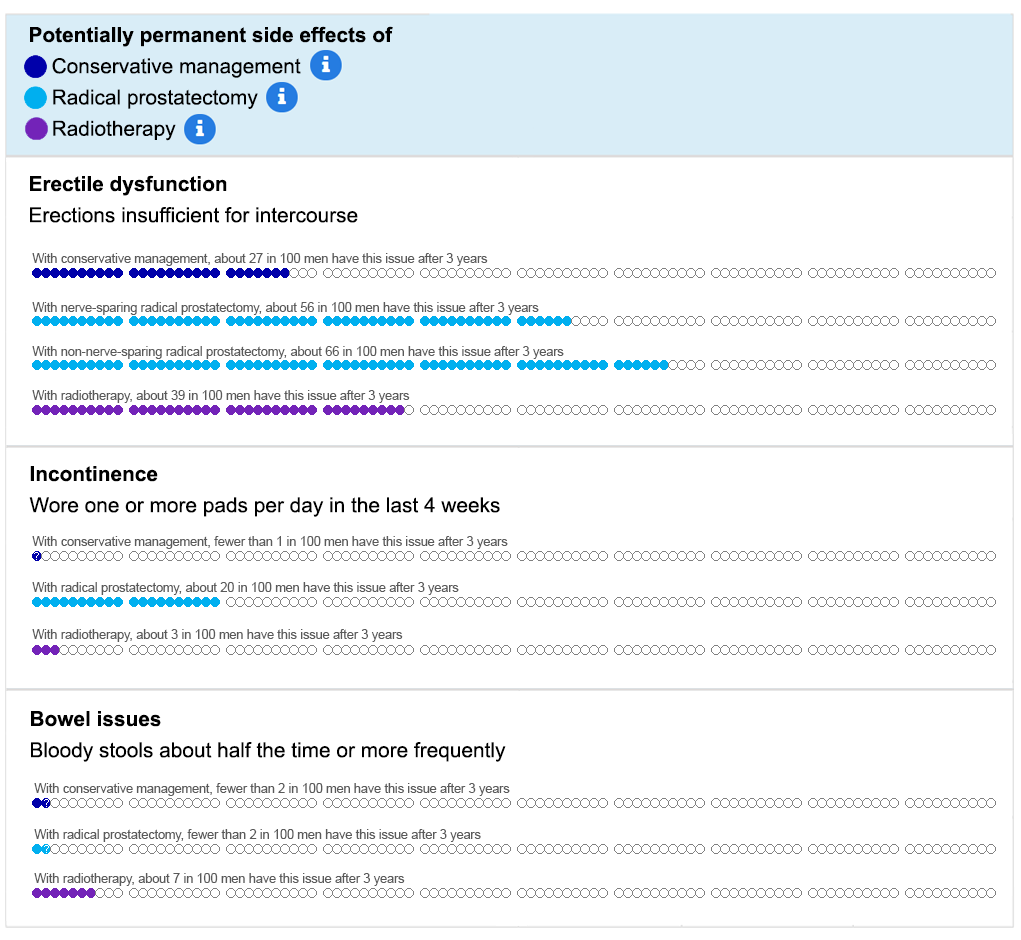
<style>
.page{position:relative;width:1021px;height:940px;background:#ffffff}
.page>*{position:absolute;margin:0}
.t1{font:20.8px/31.2px "ArialMT";color:#000000}
.t2{font:20.8px/31.2px "Arial-BoldMT";color:#000000}
.t3{font:12.5px "ArialMT";color:#5a5a5a}
</style>
<div class="page">
<p class="t1" style="left:30px;top:26px;width:363px;height:115px"><span class="t2">Potentially permanent side effects of<br></span>    Conservative management<br>    Radical prostatectomy<br>    Radiotherapy</p>
<p class="t1" style="left:30px;top:175px;width:328px;height:48px"><span class="t2">Erectile dysfunction<br></span>Erections insufficient for intercourse</p>
<p class="t3" style="left:32px;top:253px;width:456px;height:13px">With conservative management, about 27 in 100 men have this issue after 3 years</p>
<p class="t3" style="left:32px;top:302px;width:507px;height:13px">With nerve-sparing radical prostatectomy, about 56 in 100 men have this issue after 3 years</p>
<p class="t3" style="left:32px;top:346px;width:532px;height:13px">With non-nerve-sparing radical prostatectomy, about 66 in 100 men have this issue after 3 years</p>
<p class="t3" style="left:32px;top:390px;width:378px;height:13px">With radiotherapy, about 39 in 100 men have this issue after 3 years</p>
<p class="t1" style="left:29px;top:466px;width:471px;height:51px"><span class="t2">Incontinence<br></span>Wore one or more pads per day in the last 4 weeks</p>
<p class="t3" style="left:32px;top:536px;width:476px;height:13px">With conservative management, fewer than 1 in 100 men have this issue after 3 years</p>
<p class="t3" style="left:32px;top:582px;width:427px;height:13px">With radical prostatectomy, about 20 in 100 men have this issue after 3 years</p>
<p class="t3" style="left:32px;top:629px;width:371px;height:13px">With radiotherapy, about 3 in 100 men have this issue after 3 years</p>
<p class="t1" style="left:31px;top:711px;width:475px;height:51px"><span class="t2">Bowel issues<br></span>Bloody stools about half the time or more frequently</p>
<p class="t3" style="left:34px;top:783px;width:476px;height:13px">With conservative management, fewer than 2 in 100 men have this issue after 3 years</p>
<p class="t3" style="left:34px;top:829px;width:447px;height:13px">With radical prostatectomy, fewer than 2 in 100 men have this issue after 3 years</p>
<p class="t3" style="left:34px;top:873px;width:371px;height:13px">With radiotherapy, about 7 in 100 men have this issue after 3 years</p>
</div>
